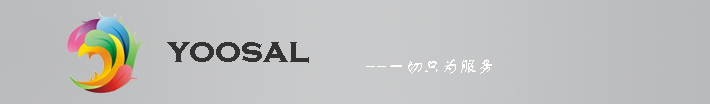
<style>
.page{position:relative;width:710px;height:104px}
.page>*{position:absolute;margin:0}
.t1{font:36px "CopperplateGothic-Bold";color:#333333}
.t2{font:18px "FZSTK--GBK1-0";color:#ffffff}
</style>
<div class="page">
<p class="t1" style="left:167px;top:42px;width:142px;height:21px">yoosal</p>
<p class="t2" style="left:366px;top:59px;width:126px;height:15px">--一切只为服务</p>
</div>
